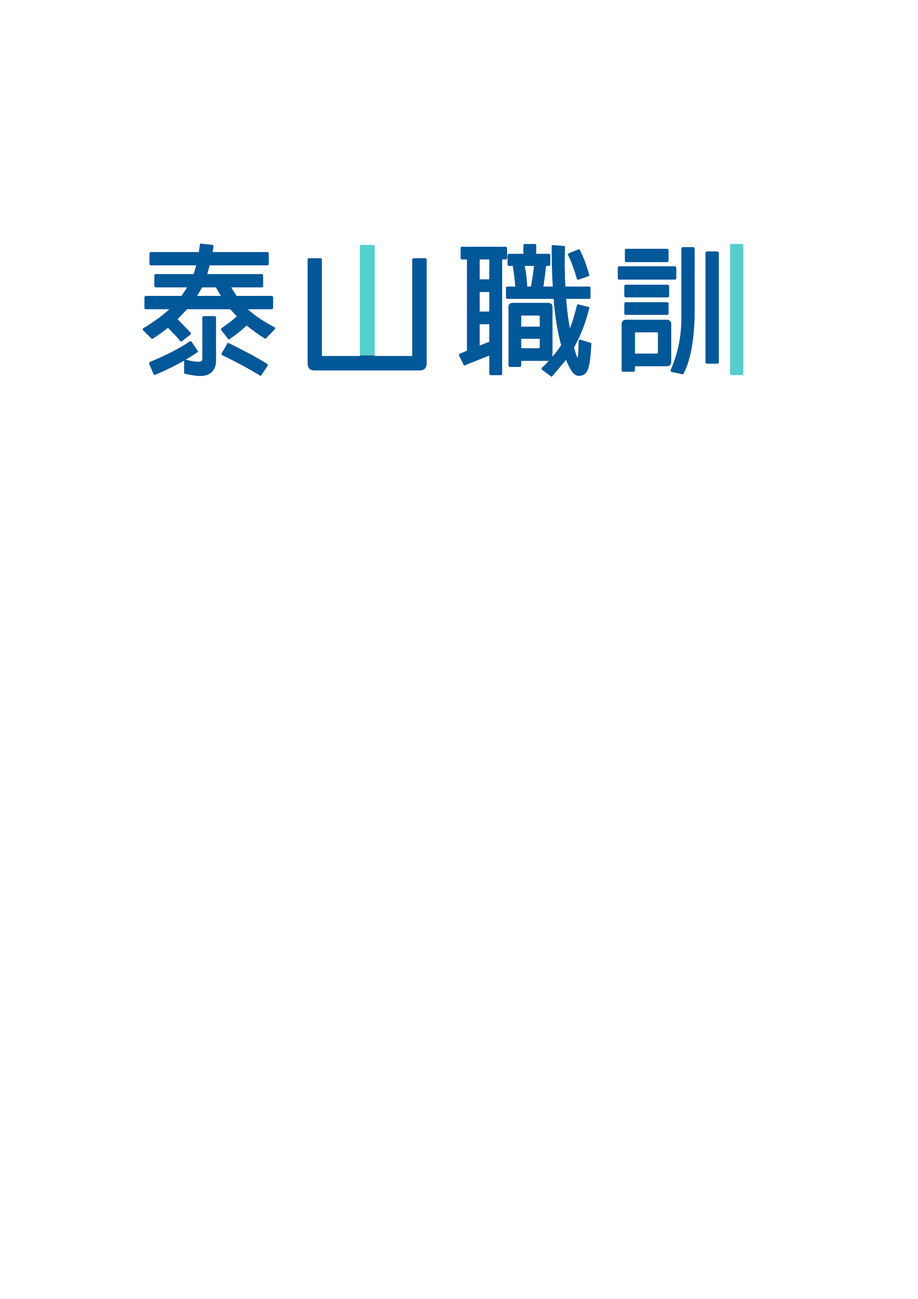
<style>
.page{position:relative;width:918px;height:1299px;background:#ffffff}
.page>*{position:absolute;margin:0}
.t1{font:140px "AdobeFanHeitiStd-Bold";letter-spacing:0.1em;color:#005899;font-weight:bold}
</style>
<div class="page">
<p class="t1" style="left:143px;top:243px;width:601px;height:134px">泰山職訓</p>
</div>
